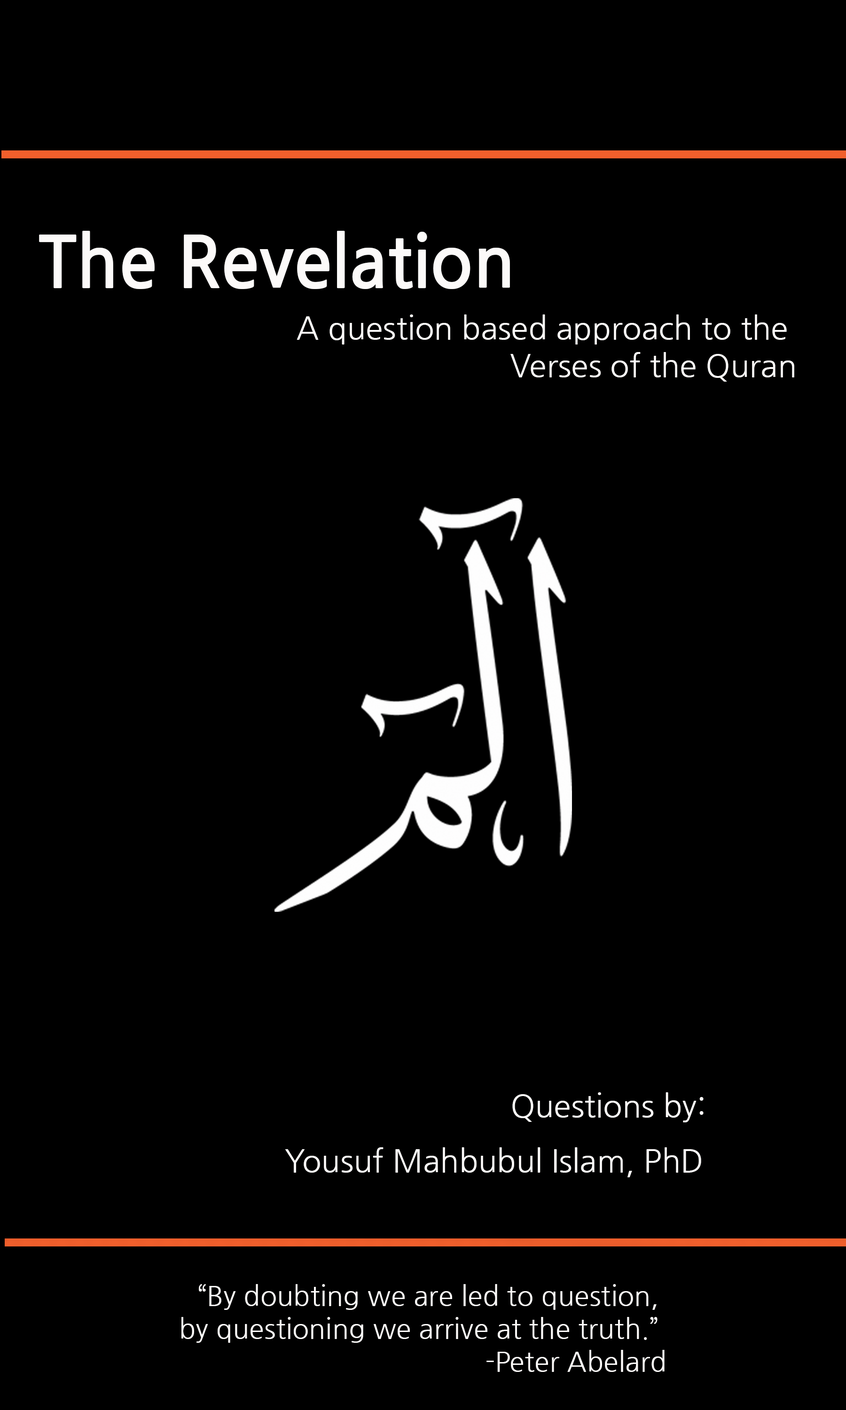
<style>
.page{position:relative;width:846px;height:1410px;background:#000000}
.page>*{position:absolute;margin:0}
.t1{font:70.5px "NanumGothicBold";color:#fcfaf9}
.t2{font:31.3px "NanumGothic";color:#fcfaf9}
.t3{font:27.4px "NanumGothic";color:#fcfaf9}
</style>
<div class="page">
<p class="t1" style="left:39px;top:231px;width:471px;height:58px">The Revelation</p>
<p class="t2" style="left:297px;top:314px;width:497px;height:68px;text-align:right">A question based approach to the <br>Verses of the Quran</p>
<p class="t2" style="left:512px;top:1092px;width:191px;height:30px">Questions by:</p>
<p class="t2" style="left:285px;top:1147px;width:416px;height:30px">Yousuf Mahbubul Islam, PhD</p>
<p class="t3" style="left:181px;top:1284px;width:483px;height:88px;text-align:right">“By doubting we are led to question, <br>by questioning we arrive at the truth.” <br>-Peter Abelard</p>
</div>
